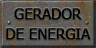
<style>
.page{position:relative;width:96px;height:48px}
.page>*{position:absolute;margin:0}
.t1{font:14.7px/20px "Tahoma";letter-spacing:-0.01em;color:#000000;text-transform:uppercase;font-weight:bold}
</style>
<div class="page">
<p class="t1" style="left:6px;top:8px;width:85px;height:32px;text-align:center">gerador<br>de energia</p>
</div>
